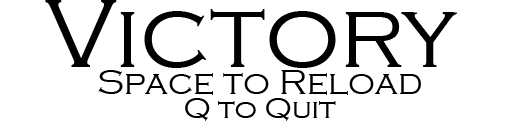
<style>
.page{position:relative;width:512px;height:128px;background:#ffffff}
.page>*{position:absolute;margin:0}
.t1{font:100px "CopperplateGothic-Light";color:#000000}
.t2{font:36px/24px "CopperplateGothic-Light";color:#000000}
.t3{font:30px/24px "CopperplateGothic-Light";color:#000000}
</style>
<div class="page">
<p class="t1" style="left:45px;top:0px;width:412px;height:68px">Victory</p>
<p class="t2" style="left:98px;top:70px;width:323px;height:51px;text-align:center">Space to Reload<br><span class="t3">Q to Quit</span></p>
</div>
